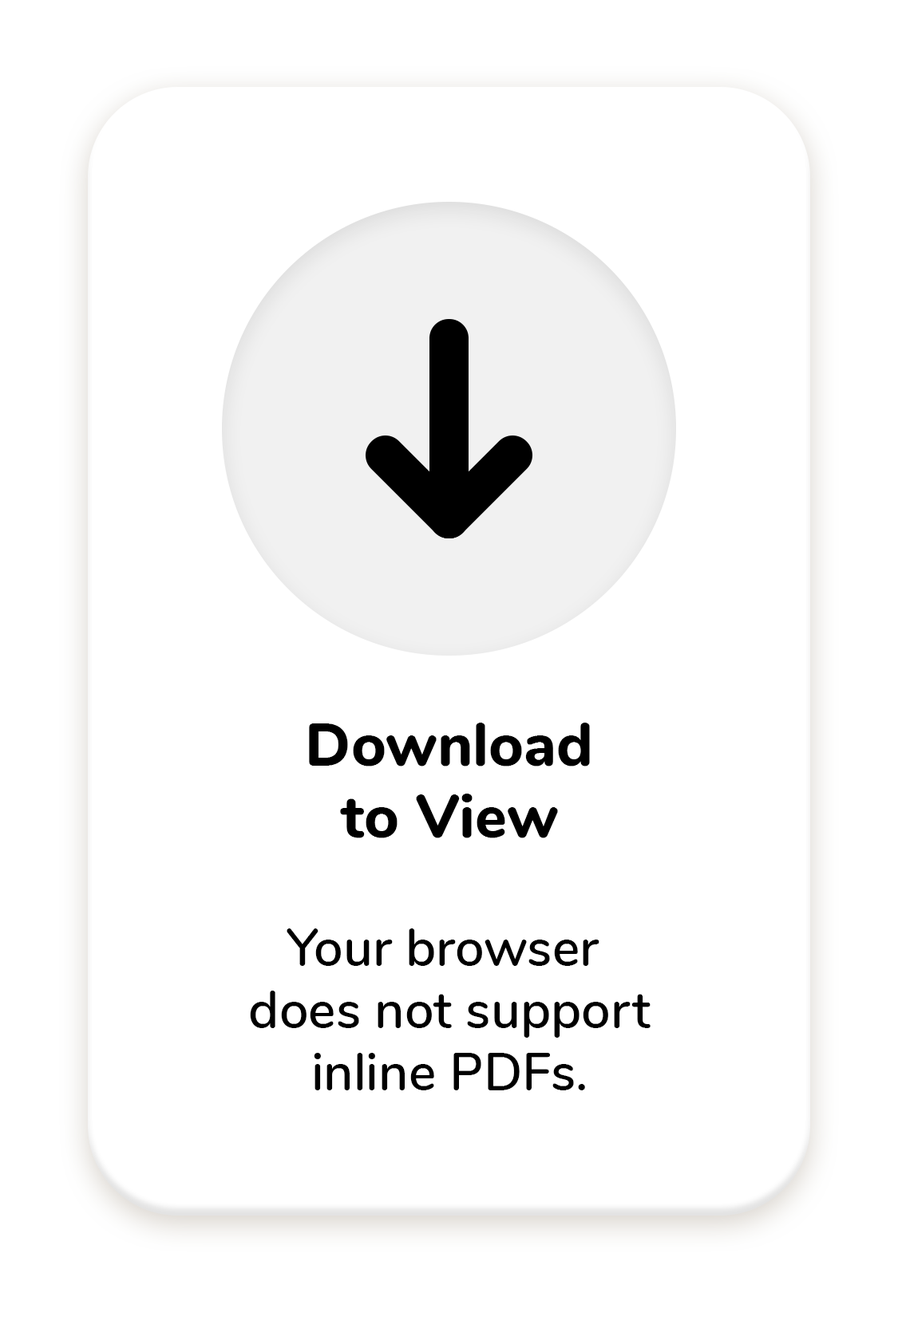
<style>
.page{position:relative;width:898px;height:1328px;background:#ffffff}
.page>*{position:absolute;margin:0}
.t1{font:59.8px "Nunito-ExtraBold";color:#000000}
.t2{font:51.9px "Nunito-SemiBold";color:#000000}
</style>
<div class="page">
<p class="t1" style="left:309px;top:723px;width:281px;height:116px;text-align:center">Download<br>to View</p>
<p class="t2" style="left:250px;top:929px;width:400px;height:162px;text-align:center">Your browser <br>does not support<br>inline PDFs.</p>
</div>
